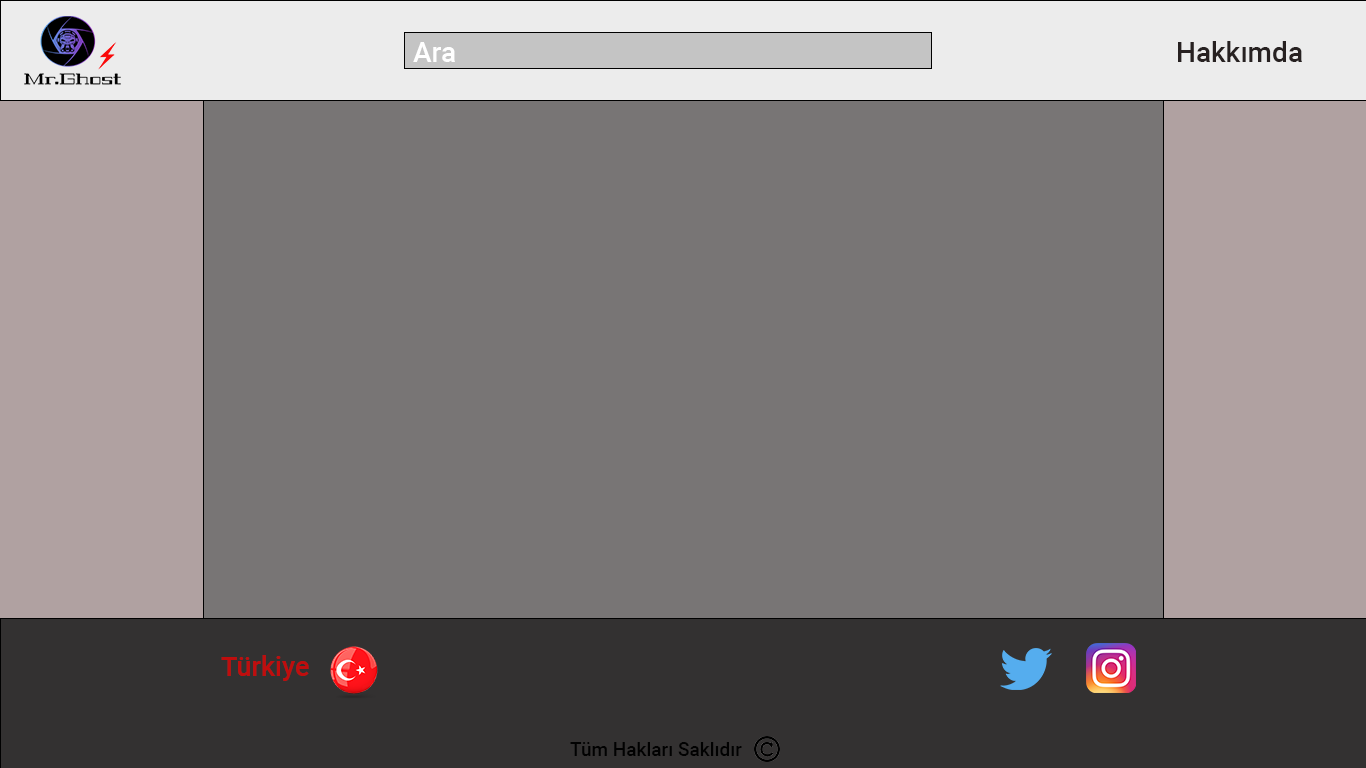
<style>
.page{position:relative;width:1366px;height:768px;background:#787575}
.page>*{position:absolute;margin:0}
.t1{font:28px "Roboto-Medium";color:#272121}
.t2{font:28px "Roboto-Medium";color:#ffffff}
.t3{font:27px "Roboto-Medium";color:#c00d0d}
.t4{font:19px "Roboto-Medium";color:#010101}
</style>
<div class="page">
<p class="t1" style="left:1178px;top:41px;width:124px;height:21px">Hakkımda</p>
<p class="t2" style="left:413px;top:42px;width:42px;height:20px">Ara</p>
<p class="t3" style="left:221px;top:655px;width:88px;height:26px">Türkiye</p>
<p class="t4" style="left:570px;top:742px;width:172px;height:14px">Tüm Hakları Saklıdır</p>
</div>
